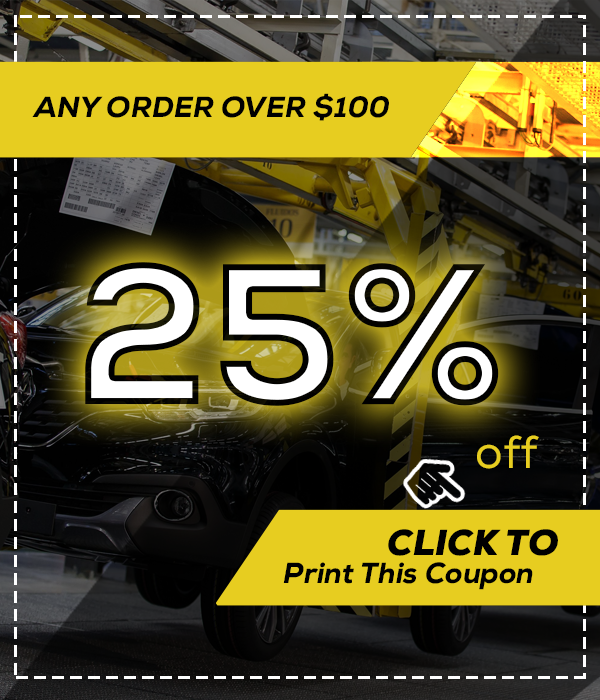
<style>
.page{position:relative;width:600px;height:700px}
.page>*{position:absolute;margin:0}
.t1{font:29px "Nexa-Heavy-Italic";color:#000000}
.t2{font:200px "NexaHeavy"}
.t3{font:46px "NexaRegular";color:#e7cd20}
.t4{font:36px "Nexa-Black-Italic";color:#000000}
</style>
<div class="page">
<p class="t1" style="left:32px;top:93px;width:357px;height:28px">ANY ORDER OVER $100</p>
<p class="t2" style="left:85px;top:262px;width:414px;height:144px">25%</p>
<p class="t3" style="left:477px;top:435px;width:62px;height:34px">off</p>
<p class="t4" style="left:388px;top:529px;width:170px;height:27px">CLICK TO</p>
<p class="t1" style="left:283px;top:562px;width:250px;height:28px">Print This Coupon</p>
</div>
